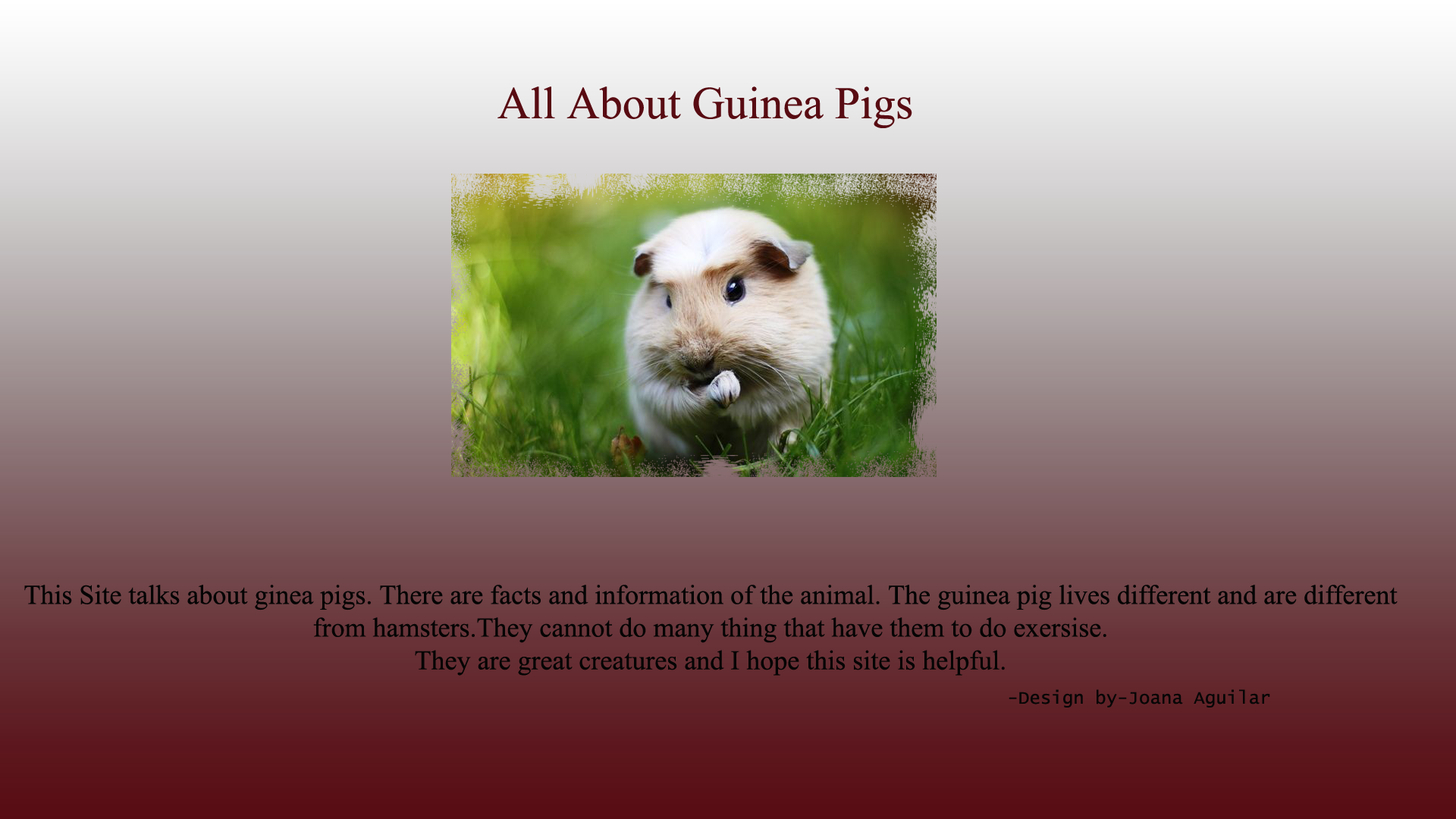
<style>
.page{position:relative;width:1456px;height:819px}
.page>*{position:absolute;margin:0}
.t1{font:45.5px "TimesNewRomanPSMT";color:#580b12}
.t2{font:27.3px "TimesNewRomanPSMT";color:#040404}
.t3{font:18.2px "LucidaConsole";color:#060606}
</style>
<div class="page">
<p class="t1" style="left:497px;top:86px;width:415px;height:42px">All About Guinea Pigs</p>
<p class="t2" style="left:24px;top:585px;width:1374px;height:91px;text-align:center">This Site talks about ginea pigs. There are facts and information of the animal. The guinea pig lives different and are different <br>from hamsters.They cannot do many thing that have them to do exersise. <br>They are great creatures and I hope this site is helpful.</p>
<p class="t3" style="left:1009px;top:689px;width:261px;height:19px">-Design by-Joana Aguilar</p>
</div>
